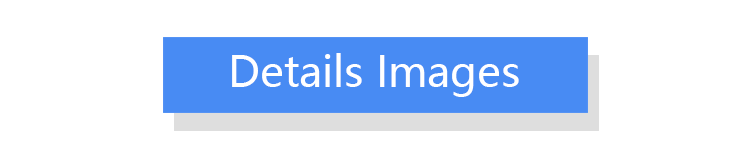
<style>
.page{position:relative;width:750px;height:150px;background:#ffffff}
.page>*{position:absolute;margin:0}
.t1{font:41.7px "MicrosoftYaHei";color:#ffffff}
</style>
<div class="page">
<p class="t1" style="left:232px;top:53px;width:287px;height:44px">Details Images</p>
</div>
